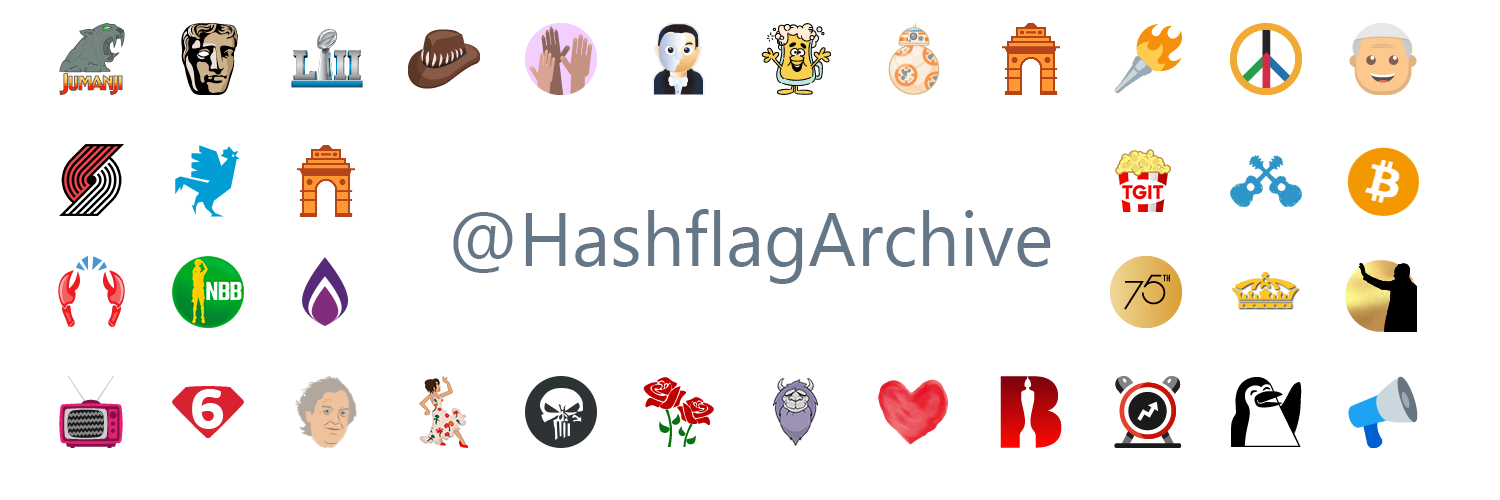
<style>
.page{position:relative;width:1500px;height:500px;background:#ffffff}
.page>*{position:absolute;margin:0}
.t1{font:75px "SegoeUI";color:#657786}
</style>
<div class="page">
<p class="t1" style="left:453px;top:209px;width:598px;height:75px">@HashflagArchive</p>
</div>
